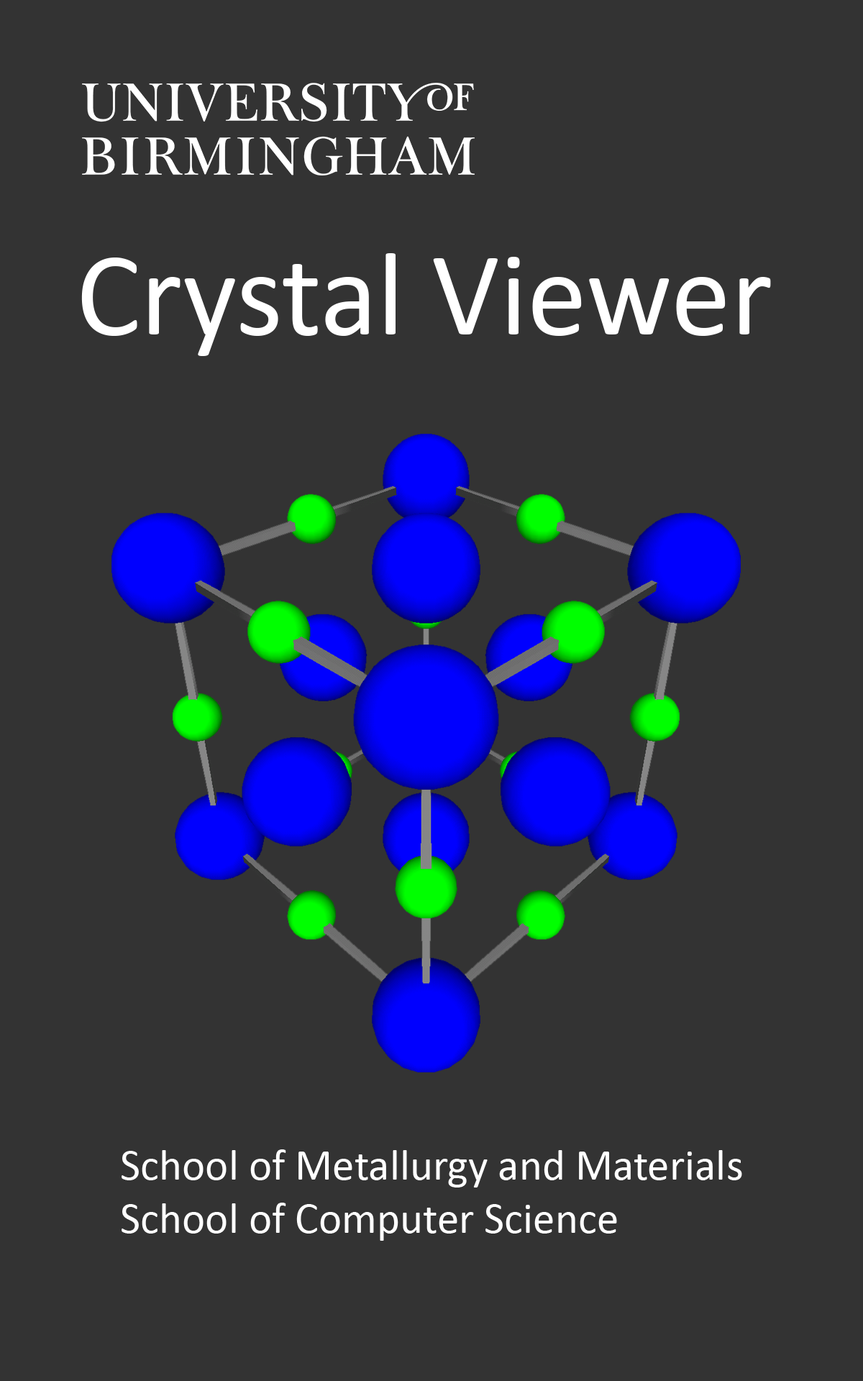
<style>
.page{position:relative;width:863px;height:1381px;background:#333333}
.page>*{position:absolute;margin:0}
.t1{font:119.9px "Calibri";color:#ffffff}
.t2{font:44px "Calibri";color:#ffffff}
</style>
<div class="page">
<p class="t1" style="left:81px;top:253px;width:690px;height:103px">Crystal Viewer</p>
<p class="t2" style="left:122px;top:1150px;width:620px;height:91px">School of Metallurgy and Materials<br>School of Computer Science</p>
</div>
